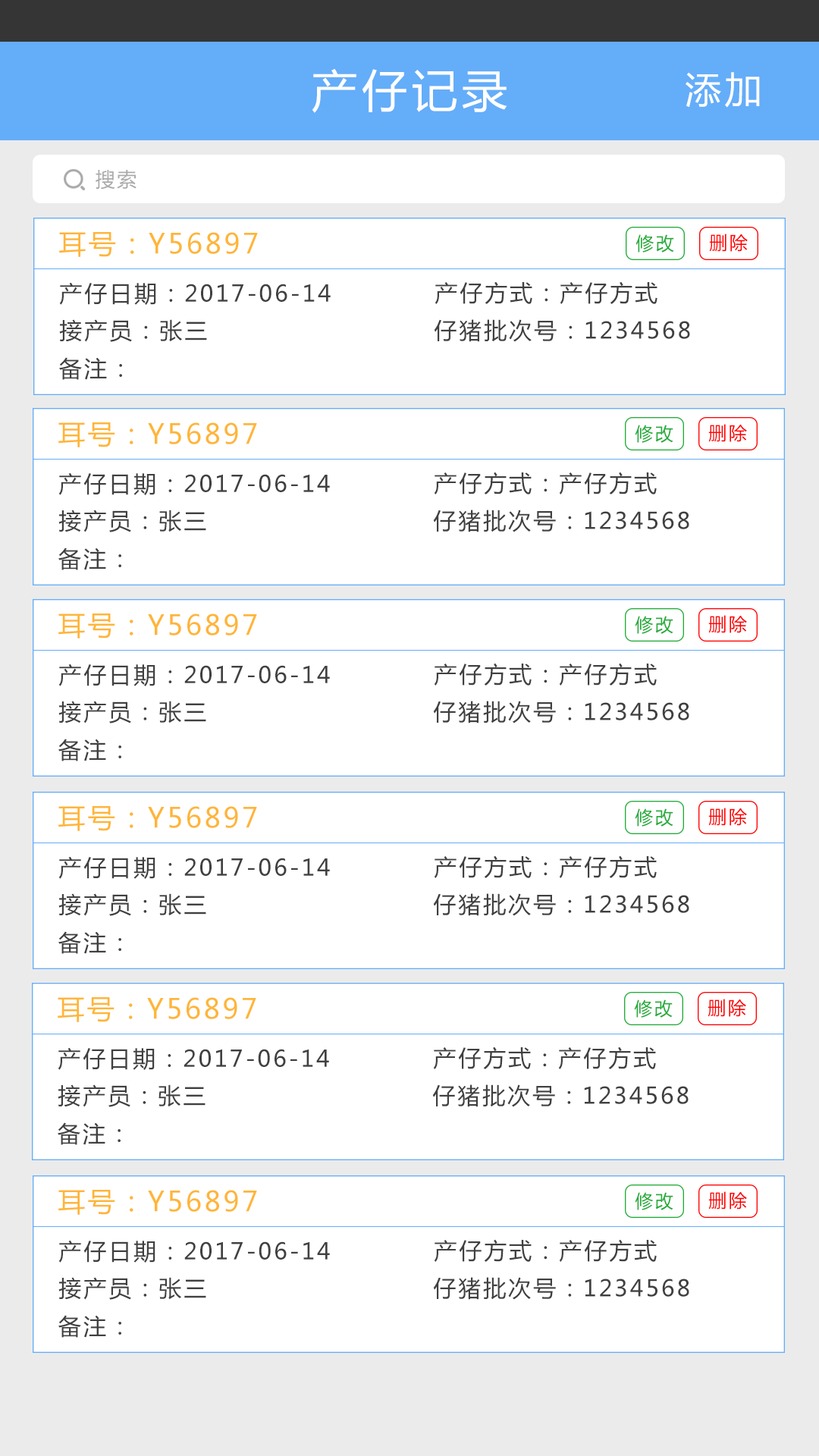
<style>
.page{position:relative;width:819px;height:1456px;background:#ffffff}
.page>*{position:absolute;margin:0}
.t1{font:45.5px "MicrosoftYaHei";letter-spacing:0.1em;color:#fffefe}
.t2{font:36.4px "MicrosoftYaHei";letter-spacing:0.1em;color:#fffefe}
.t3{font:19.7px "MicrosoftYaHei";letter-spacing:0.1em;color:#aaaaaa}
.t4{font:27.3px "MicrosoftYaHei";letter-spacing:0.1em;color:#ffb537}
.t5{font:18.2px "MicrosoftYaHei";letter-spacing:0.1em;color:#ff0000}
.t6{font:18.2px "MicrosoftYaHei";letter-spacing:0.1em;color:#22ac38}
.t7{font:22.7px "MicrosoftYaHei";letter-spacing:0.1em;color:#404040}
</style>
<div class="page">
<p class="t1" style="left:312px;top:68px;width:195px;height:45px">产仔记录</p>
<p class="t2" style="left:686px;top:72px;width:74px;height:36px">添加</p>
<p class="t3" style="left:96px;top:170px;width:40px;height:20px">搜索</p>
<p class="t4" style="left:59px;top:232px;width:199px;height:25px">耳号：Y56897</p>
<p class="t5" style="left:709px;top:234px;width:39px;height:18px">删除</p>
<p class="t6" style="left:635px;top:234px;width:39px;height:19px">修改</p>
<p class="t7" style="left:435px;top:281px;width:222px;height:23px">产仔方式：产仔方式</p>
<p class="t7" style="left:59px;top:282px;width:272px;height:23px">产仔日期：2017-06-14</p>
<p class="t7" style="left:59px;top:319px;width:148px;height:23px">接产员：张三</p>
<p class="t7" style="left:434px;top:319px;width:256px;height:23px">仔猪批次号：1234568</p>
<p class="t7" style="left:59px;top:357px;width:63px;height:23px">备注：</p>
<p class="t4" style="left:58px;top:422px;width:199px;height:25px">耳号：Y56897</p>
<p class="t6" style="left:635px;top:425px;width:38px;height:18px">修改</p>
<p class="t5" style="left:708px;top:424px;width:39px;height:18px">删除</p>
<p class="t7" style="left:58px;top:472px;width:272px;height:23px">产仔日期：2017-06-14</p>
<p class="t7" style="left:434px;top:472px;width:223px;height:22px">产仔方式：产仔方式</p>
<p class="t7" style="left:58px;top:510px;width:148px;height:22px">接产员：张三</p>
<p class="t7" style="left:433px;top:510px;width:256px;height:22px">仔猪批次号：1234568</p>
<p class="t7" style="left:58px;top:548px;width:63px;height:22px">备注：</p>
<p class="t4" style="left:58px;top:613px;width:199px;height:26px">耳号：Y56897</p>
<p class="t6" style="left:635px;top:616px;width:38px;height:18px">修改</p>
<p class="t5" style="left:708px;top:615px;width:39px;height:18px">删除</p>
<p class="t7" style="left:58px;top:664px;width:272px;height:22px">产仔日期：2017-06-14</p>
<p class="t7" style="left:434px;top:663px;width:223px;height:23px">产仔方式：产仔方式</p>
<p class="t7" style="left:58px;top:701px;width:148px;height:22px">接产员：张三</p>
<p class="t7" style="left:433px;top:701px;width:256px;height:22px">仔猪批次号：1234568</p>
<p class="t7" style="left:58px;top:739px;width:63px;height:22px">备注：</p>
<p class="t4" style="left:58px;top:806px;width:199px;height:25px">耳号：Y56897</p>
<p class="t6" style="left:635px;top:808px;width:38px;height:19px">修改</p>
<p class="t5" style="left:708px;top:808px;width:39px;height:18px">删除</p>
<p class="t7" style="left:58px;top:856px;width:272px;height:23px">产仔日期：2017-06-14</p>
<p class="t7" style="left:434px;top:855px;width:223px;height:23px">产仔方式：产仔方式</p>
<p class="t7" style="left:58px;top:893px;width:148px;height:23px">接产员：张三</p>
<p class="t7" style="left:433px;top:893px;width:256px;height:23px">仔猪批次号：1234568</p>
<p class="t7" style="left:58px;top:931px;width:63px;height:23px">备注：</p>
<p class="t4" style="left:58px;top:997px;width:198px;height:25px">耳号：Y56897</p>
<p class="t6" style="left:634px;top:999px;width:39px;height:19px">修改</p>
<p class="t5" style="left:708px;top:999px;width:38px;height:18px">删除</p>
<p class="t7" style="left:58px;top:1047px;width:271px;height:23px">产仔日期：2017-06-14</p>
<p class="t7" style="left:433px;top:1046px;width:223px;height:23px">产仔方式：产仔方式</p>
<p class="t7" style="left:58px;top:1084px;width:148px;height:23px">接产员：张三</p>
<p class="t7" style="left:432px;top:1084px;width:257px;height:23px">仔猪批次号：1234568</p>
<p class="t7" style="left:58px;top:1122px;width:63px;height:23px">备注：</p>
<p class="t4" style="left:58px;top:1190px;width:199px;height:25px">耳号：Y56897</p>
<p class="t6" style="left:635px;top:1192px;width:38px;height:18px">修改</p>
<p class="t5" style="left:708px;top:1191px;width:39px;height:19px">删除</p>
<p class="t7" style="left:58px;top:1240px;width:272px;height:23px">产仔日期：2017-06-14</p>
<p class="t7" style="left:434px;top:1239px;width:223px;height:23px">产仔方式：产仔方式</p>
<p class="t7" style="left:58px;top:1277px;width:148px;height:23px">接产员：张三</p>
<p class="t7" style="left:433px;top:1277px;width:256px;height:23px">仔猪批次号：1234568</p>
<p class="t7" style="left:58px;top:1315px;width:63px;height:23px">备注：</p>
</div>
